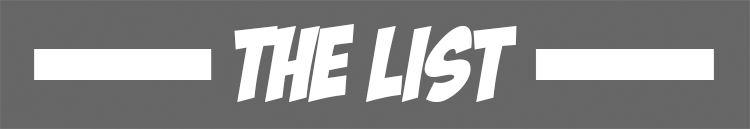
<style>
.page{position:relative;width:750px;height:129px;background:#666666}
.page>*{position:absolute;margin:0}
.t1{font:103.1px "BadaBoomBB";color:#ffffff}
</style>
<div class="page">
<p class="t1" style="left:234px;top:24px;width:283px;height:78px">THE list</p>
</div>
